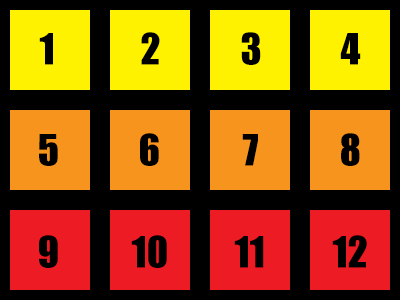
<style>
.page{position:relative;width:400px;height:300px;background:#000000}
.page>*{position:absolute;margin:0}
.t1{font:40px "Impact";color:#000001}
</style>
<div class="page">
<p class="t1" style="left:39px;top:33px;width:14px;height:32px">1</p>
<p class="t1" style="left:141px;top:32px;width:19px;height:33px">2</p>
<p class="t1" style="left:241px;top:32px;width:20px;height:33px">3</p>
<p class="t1" style="left:340px;top:33px;width:21px;height:32px">4</p>
<p class="t1" style="left:39px;top:134px;width:19px;height:32px">5</p>
<p class="t1" style="left:140px;top:133px;width:19px;height:33px">6</p>
<p class="t1" style="left:242px;top:134px;width:16px;height:32px">7</p>
<p class="t1" style="left:341px;top:133px;width:19px;height:33px">8</p>
<p class="t1" style="left:39px;top:235px;width:19px;height:33px">9</p>
<p class="t1" style="left:131px;top:235px;width:36px;height:33px">10</p>
<p class="t1" style="left:234px;top:236px;width:30px;height:32px">11</p>
<p class="t1" style="left:332px;top:235px;width:35px;height:33px">12</p>
</div>
